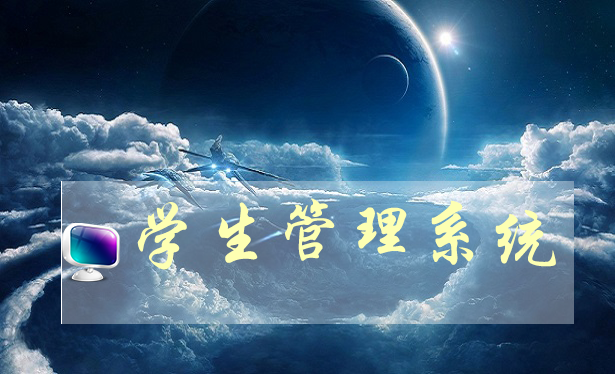
<style>
.page{position:relative;width:615px;height:374px}
.page>*{position:absolute;margin:0}
.t1{font:72px "STXingkai";color:#fdffb2}
</style>
<div class="page">
<p class="t1" style="left:137px;top:198px;width:419px;height:72px">学生管理系统</p>
</div>
